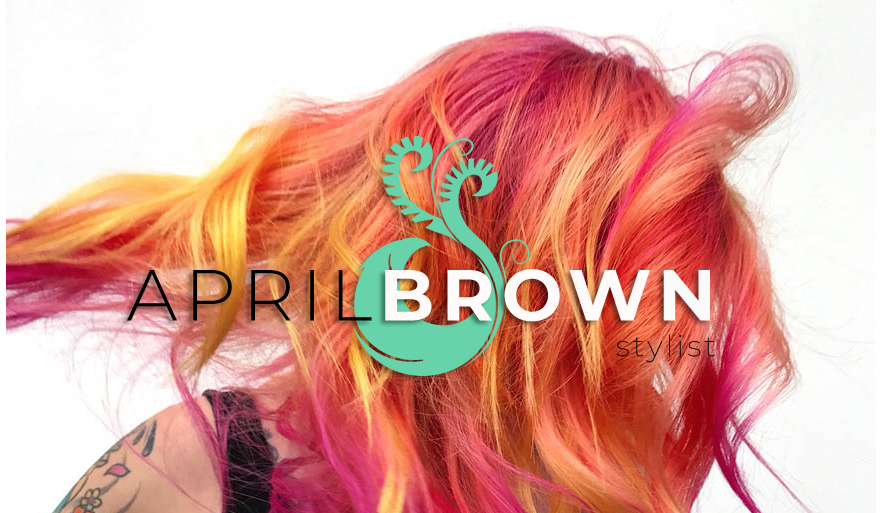
<style>
.page{position:relative;width:882px;height:513px}
.page>*{position:absolute;margin:0}
.t1{font:30px "Montserrat-ExtraLight";letter-spacing:0.1em;color:#000000}
.t2{font:72px "Montserrat-Light";letter-spacing:0.1em;color:#000000}
.t3{font:72px "Montserrat-Bold";letter-spacing:0.1em;color:#fffafa}
.t4{font:72px "Montserrat-Bold";letter-spacing:1.717em;color:#fbfafa}
</style>
<div class="page">
<p class="t1" style="left:127px;top:269px;width:588px;height:94px;text-align:right"><span class="t2">APRIL</span><span class="t3">BROW</span><span class="t4">N<br></span>stylist</p>
</div>
